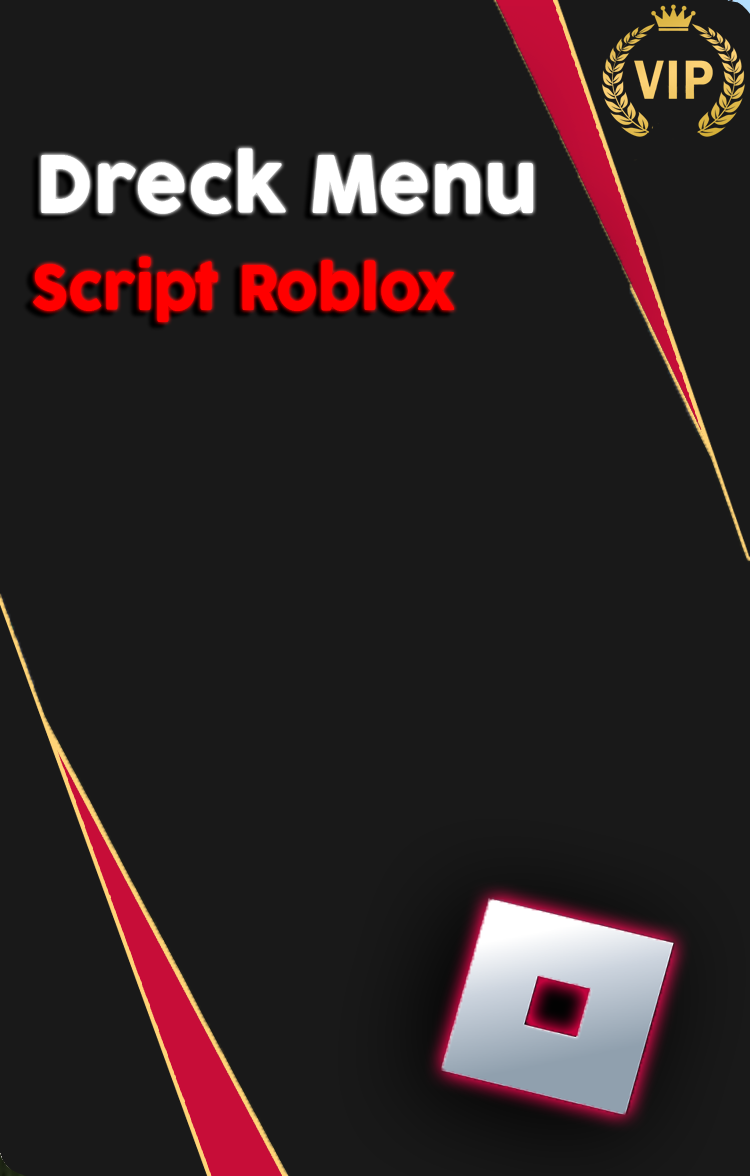
<style>
.page{position:relative;width:750px;height:1176px;background:#191919}
.page>*{position:absolute;margin:0}
.t1{font:78.4px "Cocogoose";color:#ffffff;scale:0.95 1}
.t2{font:60px "Cocogoose";color:#ff0000;scale:0.95 1}
</style>
<div class="page">
<p class="t1" style="left:41px;top:148px;width:492px;height:66px">Dreck Menu</p>
<p class="t2" style="left:33px;top:256px;width:422px;height:66px">Script Roblox</p>
</div>
